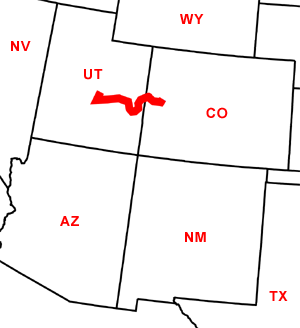
<style>
.page{position:relative;width:300px;height:328px;background:#ffffff}
.page>*{position:absolute;margin:0}
.t1{font:14px "Arial-BoldMT";letter-spacing:0.05em;color:#ff0000}
</style>
<div class="page">
<p class="t1" style="left:180px;top:14px;width:24px;height:10px">WY</p>
<p class="t1" style="left:11px;top:41px;width:20px;height:10px">NV</p>
<p class="t1" style="left:84px;top:69px;width:19px;height:11px">UT</p>
<p class="t1" style="left:206px;top:107px;width:22px;height:12px">CO</p>
<p class="t1" style="left:60px;top:216px;width:19px;height:10px">AZ</p>
<p class="t1" style="left:185px;top:232px;width:21px;height:10px">NM</p>
<p class="t1" style="left:269px;top:291px;width:19px;height:10px">TX</p>
</div>
